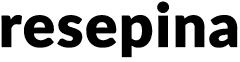
<style>
.page{position:relative;width:240px;height:62px;background:#ffffff}
.page>*{position:absolute;margin:0}
.t1{font:60px "Lato-Black";color:#000000;font-weight:bold}
</style>
<div class="page">
<p class="t1" style="left:1px;top:1px;width:237px;height:57px">resepina</p>
</div>
